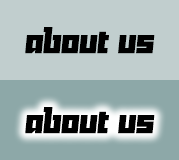
<style>
.page{position:relative;width:179px;height:160px;background:#c1cece}
.page>*{position:absolute;margin:0}
.t1{font:33.4px "Yukarimobile";color:#000000}
</style>
<div class="page">
<p class="t1" style="left:25px;top:27px;width:130px;height:27px">about us</p>
<p class="t1" style="left:25px;top:107px;width:130px;height:27px">about us</p>
</div>
